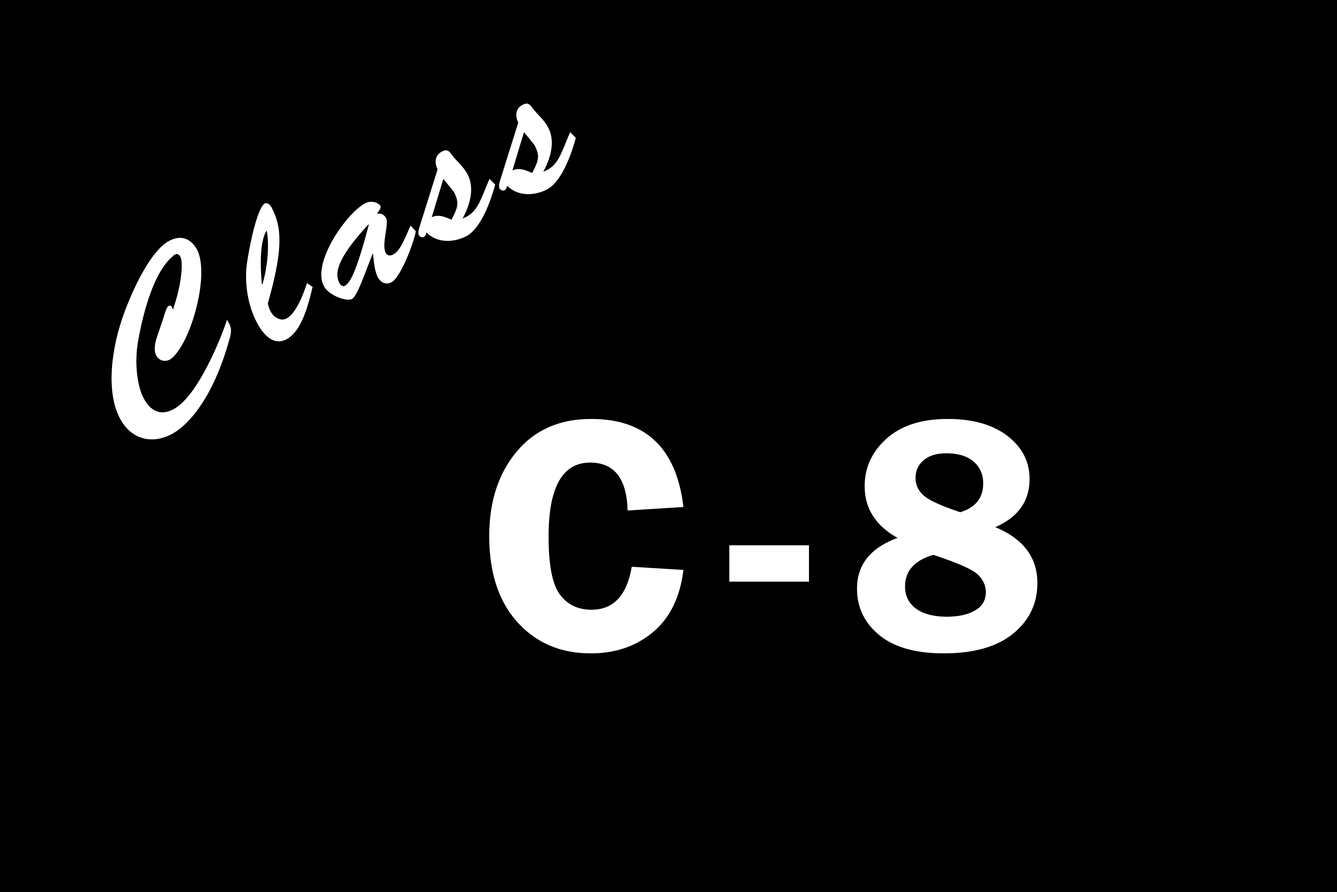
<style>
.page{position:relative;width:1337px;height:892px;background:#000000}
.page>*{position:absolute;margin:0}
.t1{font:203.7px "BrushScriptStd";letter-spacing:0.1em;color:#ffffff}
.t2{font:341.1px "FranklinGothic-Demi";letter-spacing:0.1em;color:#ffffff}
</style>
<div class="page">
<p class="t1" style="left:111px;top:103px;width:465px;height:336px;rotate:-30deg">Class</p>
<p class="t2" style="left:489px;top:419px;width:549px;height:234px">C-8</p>
</div>
